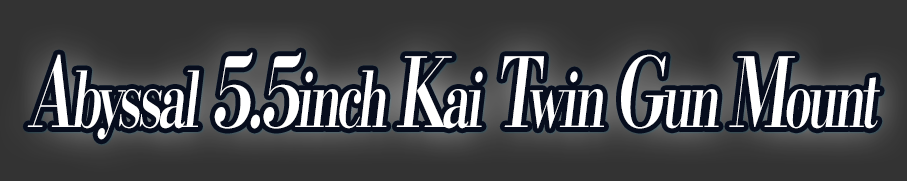
<style>
.page{position:relative;width:907px;height:181px;background:#333333}
.page>*{position:absolute;margin:0}
.t1{font:76.8px "KochoStd-Heavy";letter-spacing:-0.08em;color:#ffffff;font-style:italic;scale:0.66 1}
.t2{font:96px "KochoStd-Heavy";letter-spacing:-0.08em;color:#ffffff;font-style:italic;scale:0.66 1}
</style>
<div class="page">
<p class="t1" style="left:27px;top:52px;width:853px;height:88px"><span class="t2">A</span>byssal<span class="t2"> 5.5</span>inch <span class="t2">K</span>ai<span class="t2"> T</span>win <span class="t2">G</span>un <span class="t2">M</span>ount</p>
</div>
